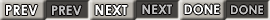
<style>
.page{position:relative;width:270px;height:20px}
.page>*{position:absolute;margin:0}
.t1{font:14px "CenturyGothic-Bold";color:#ffffff}
.t2{font:13px "CenturyGothic-Bold";color:#c1c1c1}
.t3{font:13px "CenturyGothic-Bold";color:#ffffff}
.t4{font:12px "CenturyGothic-Bold";color:#c1c1c1}
</style>
<div class="page">
<p class="t1" style="left:6px;top:5px;width:32px;height:10px">PREV</p>
<p class="t2" style="left:52px;top:5px;width:30px;height:10px">PREV</p>
<p class="t1" style="left:95px;top:5px;width:33px;height:10px">NEXT</p>
<p class="t2" style="left:142px;top:4px;width:30px;height:10px">NEXT</p>
<p class="t3" style="left:184px;top:4px;width:36px;height:11px">DONE</p>
<p class="t4" style="left:231px;top:5px;width:32px;height:10px">DONE</p>
</div>
